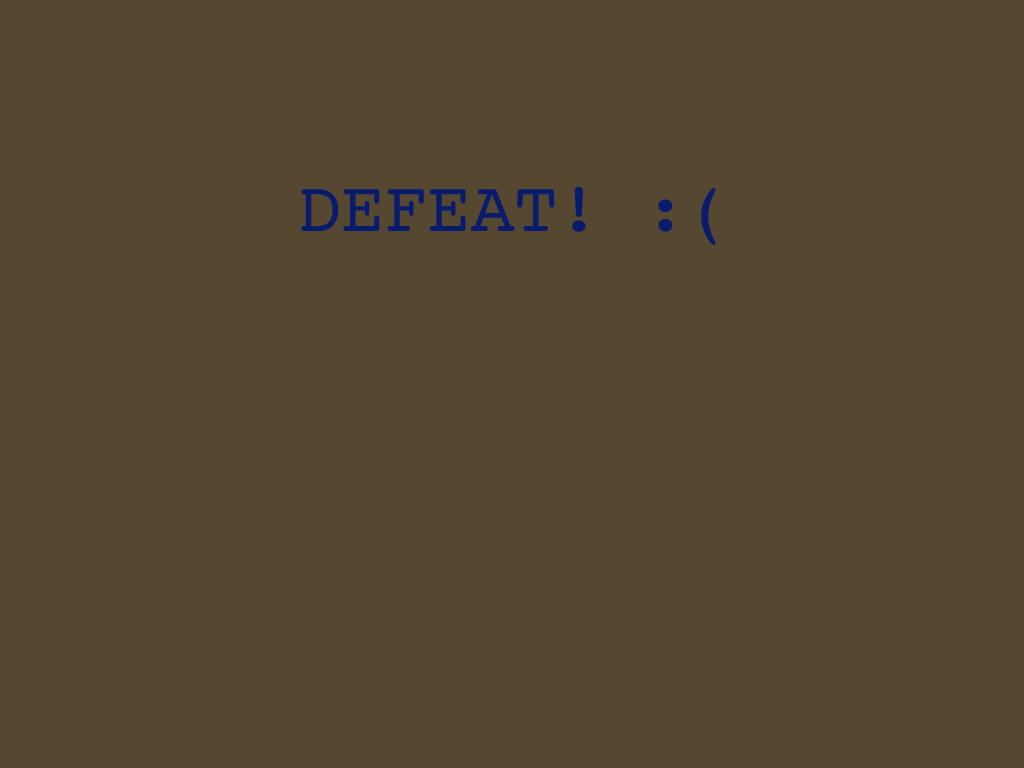
<style>
.page{position:relative;width:1024px;height:768px;background:#564730}
.page>*{position:absolute;margin:0}
.t1{font:72px "Courier";color:#081b6c}
</style>
<div class="page">
<p class="t1" style="left:301px;top:187px;width:415px;height:58px">DEFEAT! :(</p>
</div>
